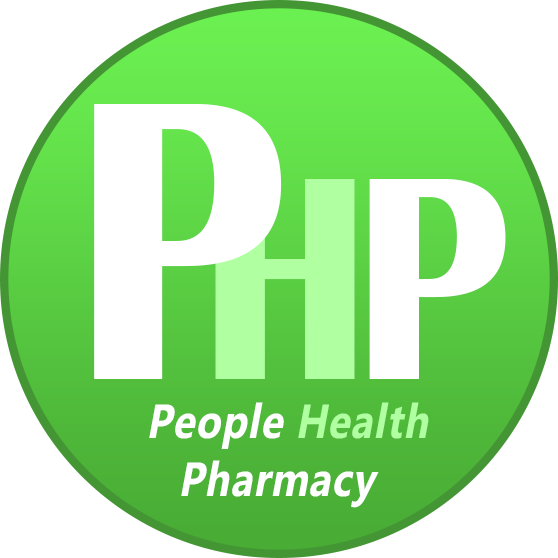
<style>
.page{position:relative;width:558px;height:558px;background:#ffffff}
.page>*{position:absolute;margin:0}
.t1{font:413.1px "BritannicBold";letter-spacing:0.025em;color:#ffffff;scale:0.85 1}
.t2{font:300px "BritannicBold";letter-spacing:0.025em;color:#b0ffa1;scale:0.85 1}
.t3{font:300px "BritannicBold";letter-spacing:0.025em;color:#ffffff;scale:0.85 1}
.t4{font:48.8px "Ebrima-Bold";letter-spacing:0.025em;color:#ffffff;scale:0.84 1}
.t5{font:48.8px "Ebrima-Bold";letter-spacing:0.025em;color:#b0ffa1;scale:0.84 1}
</style>
<div class="page">
<p class="t1" style="left:94px;top:104px;width:188px;height:275px">P</p>
<p class="t2" style="left:215px;top:179px;width:140px;height:200px">H</p>
<p class="t3" style="left:369px;top:179px;width:137px;height:200px">P</p>
<p class="t4" style="left:149px;top:402px;width:280px;height:106px;text-align:center">People <span class="t5">Health<br></span>Pharmacy</p>
</div>
